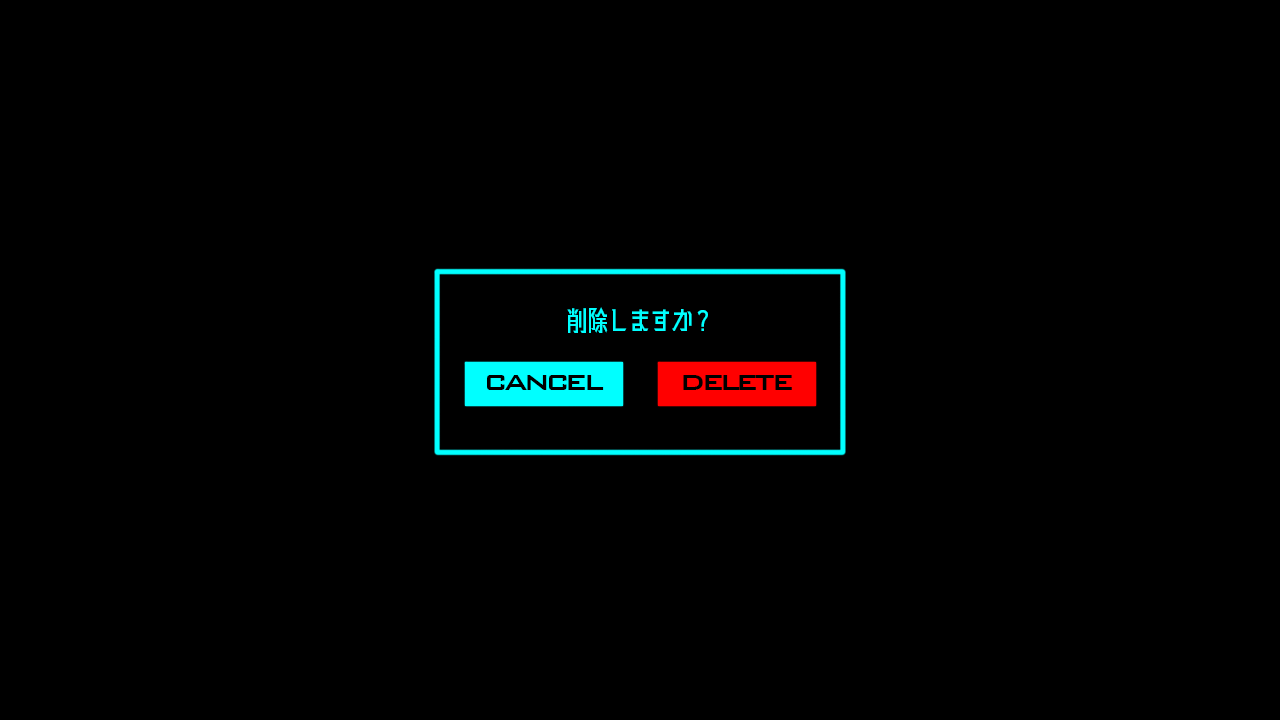
<style>
.page{position:relative;width:1280px;height:720px;background:#000000}
.page>*{position:absolute;margin:0}
.t1{font:30px "Kaisotai-Next-UP-B";letter-spacing:-0.1em;color:#00ffff}
.t2{font:36px "BankGothicBT-Medium";letter-spacing:-0.1em;color:#000000}
</style>
<div class="page">
<p class="t1" style="left:567px;top:307px;width:141px;height:26px">削除しますか？</p>
<p class="t2" style="left:486px;top:375px;width:116px;height:15px">cancel</p>
<p class="t2" style="left:487px;top:375px;width:117px;height:15px">cancel</p>
<p class="t2" style="left:683px;top:375px;width:109px;height:15px">delete</p>
<p class="t2" style="left:683px;top:375px;width:109px;height:15px">delete</p>
</div>
